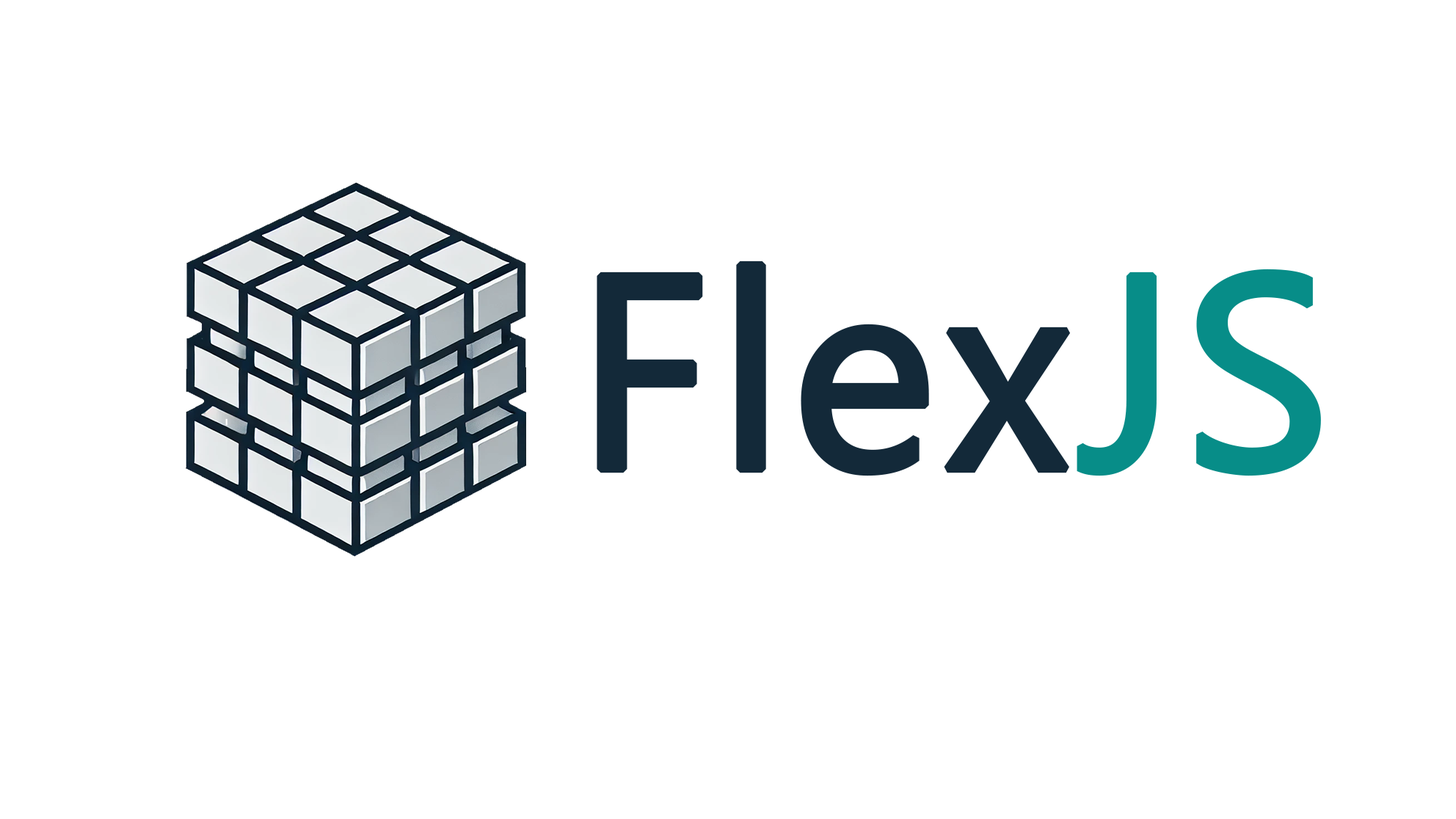
<style>
.page{position:relative;width:1456px;height:819px;background:#ffffff}
.page>*{position:absolute;margin:0}
.t1{font:275.9px "SegoeUIHistoric";color:#132939;font-weight:bold}
.t2{font:275.9px "SegoeUIHistoric";color:#078d88;font-weight:bold}
</style>
<div class="page">
<p class="t1" style="left:597px;top:261px;width:724px;height:215px">Flex<span class="t2">JS</span></p>
</div>
